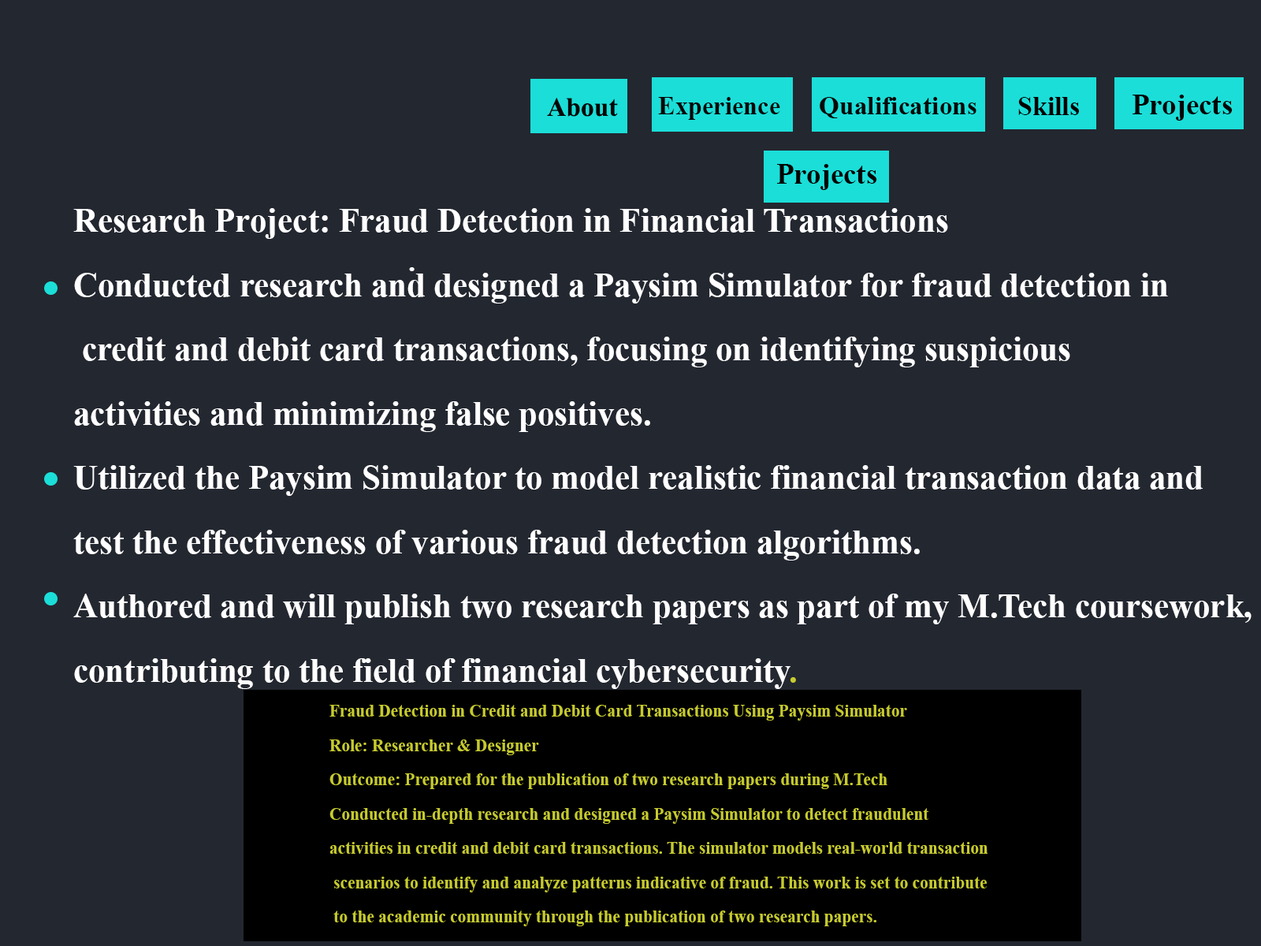
<style>
.page{position:relative;width:1261px;height:946px;background:#232730}
.page>*{position:absolute;margin:0}
.t1{font:26.5px "TimesNewRomanPS-BoldMT";color:#050505}
.t2{font:25.8px "TimesNewRomanPS-BoldMT";color:#060606}
.t3{font:25.8px "TimesNewRomanPS-BoldMT";color:#070707}
.t4{font:26.5px "TimesNewRomanPS-BoldMT";color:#010101}
.t5{font:29.2px "TimesNewRomanPS-BoldMT";color:#030303}
.t6{font:33.8px "TimesNewRomanPS-BoldMT";color:#ffffff}
.t7{font:33.8px "TimesNewRomanPS-BoldMT";color:#c6ca2f}
.t8{font:29.4px "TimesNewRomanPS-BoldMT";color:#ffffff}
.t9{font:18.1px "TimesNewRomanPS-BoldMT";color:#c6ca2f;scale:0.93 1}
</style>
<div class="page">
<p class="t1" style="left:547px;top:98px;width:71px;height:19px">About</p>
<p class="t2" style="left:658px;top:97px;width:122px;height:23px">Experience</p>
<p class="t3" style="left:820px;top:97px;width:156px;height:21px">Qualifications</p>
<p class="t4" style="left:1018px;top:97px;width:61px;height:18px">Skills</p>
<p class="t5" style="left:1132px;top:95px;width:101px;height:26px">Projects</p>
<p class="t5" style="left:777px;top:164px;width:100px;height:26px">Projects</p>
<p class="t6" style="left:73px;top:208px;width:1178px;height:481px">Research Project: Fraud Detection in Financial Transactions<br>Conducted research and designed a Paysim Simulator for fraud detection in<br> credit and debit card transactions, focusing on identifying suspicious <br>activities and minimizing false positives.<br>Utilized the Paysim Simulator to model realistic financial transaction data and <br>test the effectiveness of various fraud detection algorithms.<br>Authored and will publish two research papers as part of my M.Tech coursework, <br>contributing to the field of financial cybersecurity<span class="t7">.</span></p>
<p class="t8" style="left:409px;top:267px;width:6px;height:4px">.</p>
<p class="t9" style="left:329px;top:705px;width:658px;height:221px">Fraud Detection in Credit and Debit Card Transactions Using Paysim Simulator<br>Role: Researcher &amp; Designer<br>Outcome: Prepared for the publication of two research papers during M.Tech<br>Conducted in-depth research and designed a Paysim Simulator to detect fraudulent <br>activities in credit and debit card transactions. The simulator models real-world transaction<br> scenarios to identify and analyze patterns indicative of fraud. This work is set to contribute<br> to the academic community through the publication of two research papers.</p>
</div>
